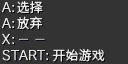
<style>
.page{position:relative;width:128px;height:64px;background:#333333}
.page>*{position:absolute;margin:0}
.t1{font:13px/16px "SourceHanSansSC-Regular";color:#eaeaea}
.t2{font:13px "SourceHanSansSC-Regular";color:#e9e9e9}
</style>
<div class="page">
<p class="t1" style="left:17px;top:1px;width:26px;height:29px">选择<br>放弃</p>
<p class="t2" style="left:52px;top:48px;width:53px;height:14px">开始游戏</p>
</div>
